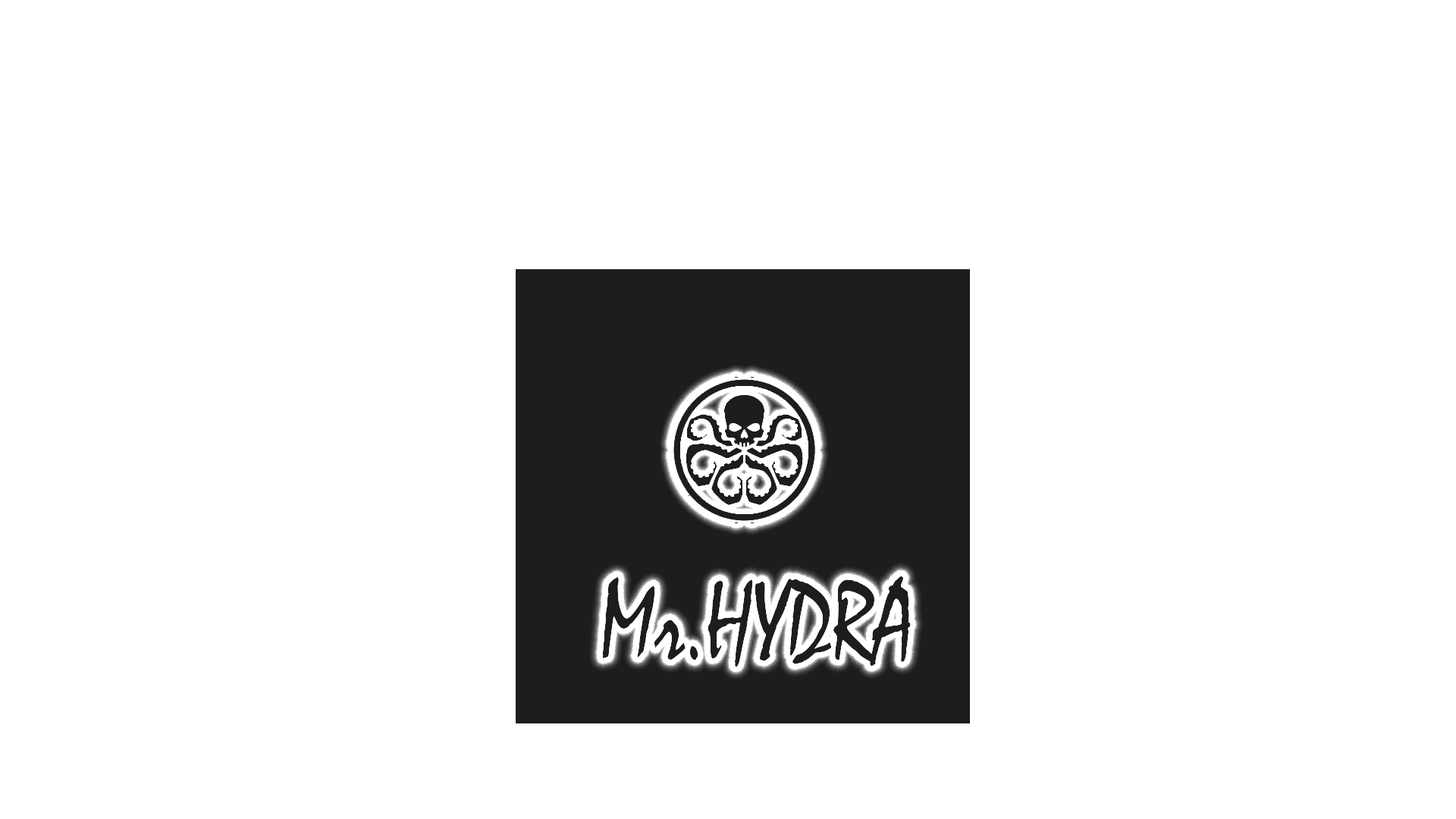
<style>
.page{position:relative;width:1456px;height:819px;background:#ffffff}
.page>*{position:absolute;margin:0}
.t1{font:116.3px "Mistral";color:#1d1d1d;scale:0.79 1}
</style>
<div class="page">
<p class="t1" style="left:602px;top:576px;width:309px;height:91px">Mr.HYDRA</p>
<p class="t1" style="left:602px;top:576px;width:309px;height:91px">Mr.HYDRA</p>
<p class="t1" style="left:602px;top:576px;width:309px;height:91px">Mr.HYDRA</p>
</div>
